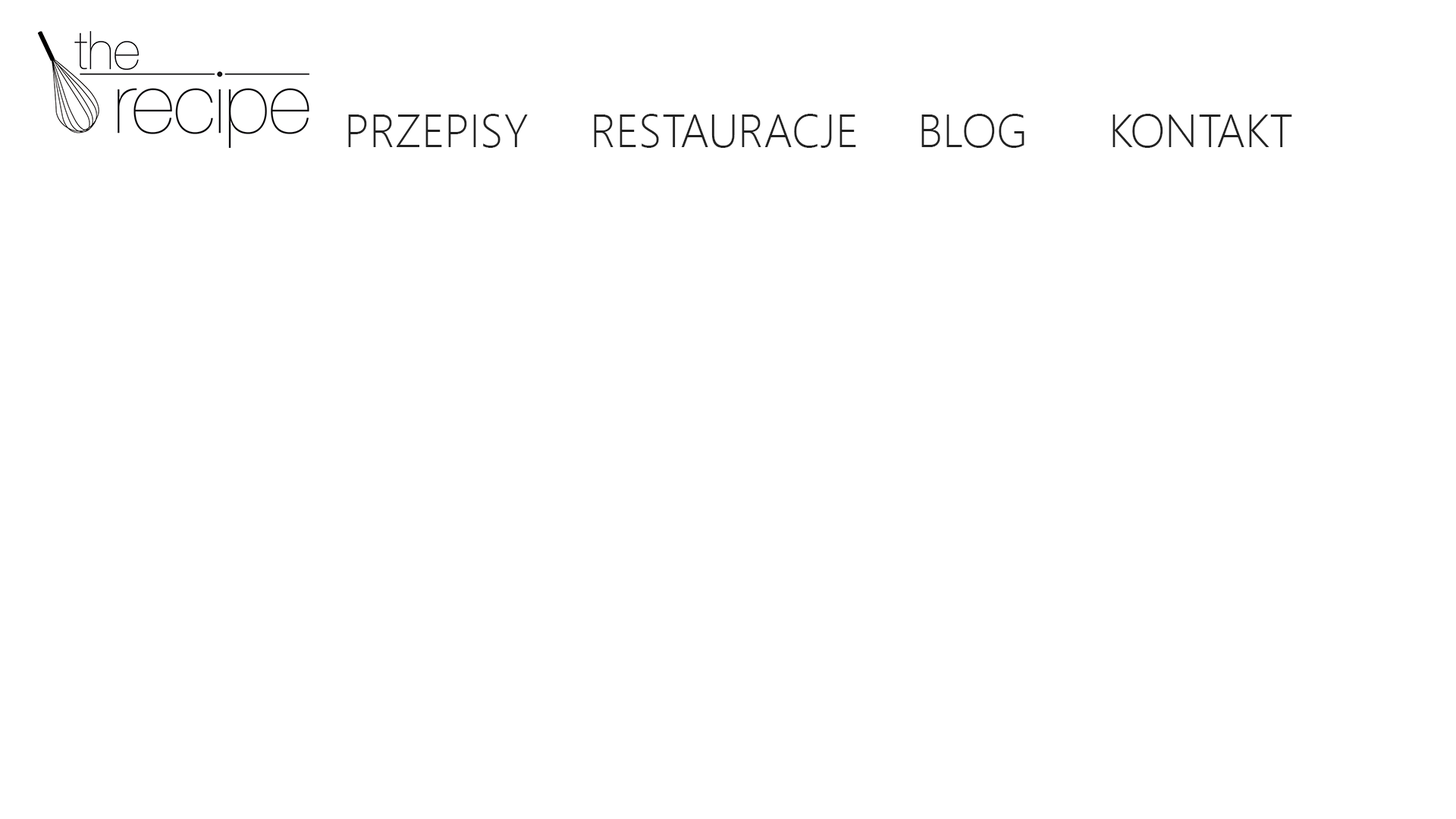
<style>
.page{position:relative;width:1456px;height:819px;background:#ffffff}
.page>*{position:absolute;margin:0}
.t1{font:46.2px "SegoeUI-Light";color:#222222}
</style>
<div class="page">
<p class="t1" style="left:348px;top:114px;width:944px;height:34px">PRZEPISY   RESTAURACJE   BLOG   KONTAKT</p>
</div>
